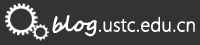
<style>
.page{position:relative;width:200px;height:45px;background:#333333}
.page>*{position:absolute;margin:0}
.t1{font:18.8px "SegoeUI-Light";color:#ffffff;font-weight:bold}
.t2{font:17.2px "SegoeScript";color:#030000;font-weight:bold}
.t3{font:20.8px "SegoeScript";color:#ffffff;font-weight:bold}
</style>
<div class="page">
<p class="t1" style="left:52px;top:15px;width:143px;height:22px"><span class="t2"> </span><span class="t3">blog</span>.ustc.edu.cn</p>
</div>
